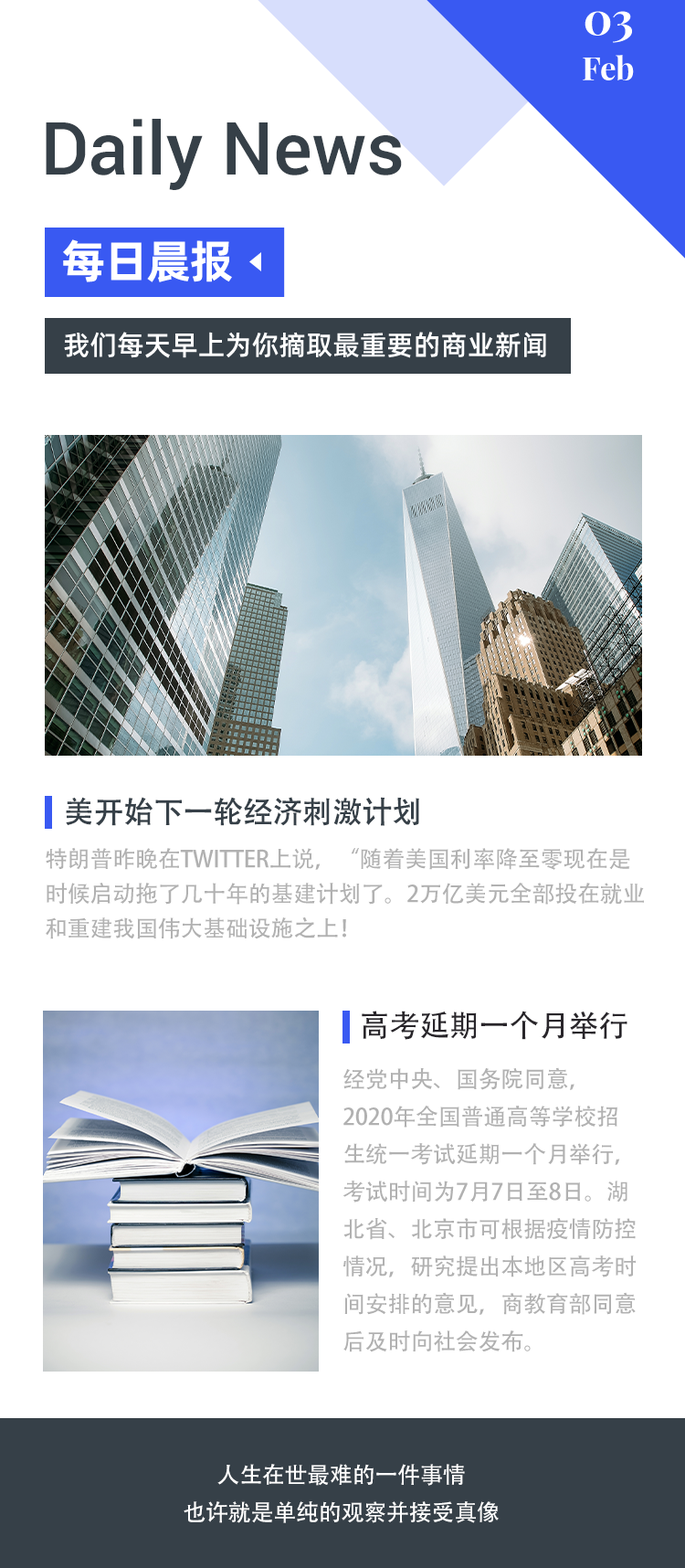
<style>
.page{position:relative;width:685px;height:1568px;background:#ffffff}
.page>*{position:absolute;margin:0}
.t1{font:73.1px "Roboto-Medium";color:#364048}
.t2{font:30.2px "AdobeHeitiStd-Regular";letter-spacing:-0.01em;color:#364048;text-transform:uppercase}
.t3{font:22.8px/34.7px "AdobeHeitiStd-Regular";letter-spacing:-0.01em;color:#b1b1b1;text-transform:uppercase}
.t4{font:30.2px "AdobeHeitiStd-Regular";letter-spacing:-0.01em;color:#28252a;text-transform:uppercase}
.t5{font:22.8px/37.5px "AdobeHeitiStd-Regular";letter-spacing:-0.01em;color:#b1b1b1;text-transform:uppercase}
.t6{font:22.8px/37.5px "AdobeHeitiStd-Regular";letter-spacing:-0.01em;color:#ffffff;text-transform:uppercase}
</style>
<div class="page">
<p class="t1" style="left:46px;top:119px;width:356px;height:71px">Daily News</p>
<p class="t2" style="left:66px;top:797px;width:353px;height:29px">美开始下一轮经济刺激计划</p>
<p class="t3" style="left:46px;top:847px;width:598px;height:92px">特朗普昨晚在Twitter上说，“随着美国利率降至零现在是时候启动拖了几十年的基建计划了。2万亿美元全部投在就业和重建我国伟大基础设施之上！</p>
<p class="t4" style="left:362px;top:1011px;width:266px;height:29px">高考延期一个月举行</p>
<p class="t5" style="left:343px;top:1067px;width:293px;height:285px">经党中央、国务院同意，2020年全国普通高等学校招生统一考试延期一个月举行，考试时间为7月7日至8日。湖北省、北京市可根据疫情防控情况，研究提出本地区高考时间安排的意见，商教育部同意后及时向社会发布。</p>
<p class="t6" style="left:184px;top:1464px;width:315px;height:59px;text-align:center">人生在世最难的一件事情<br>也许就是单纯的观察并接受真像</p>
</div>
